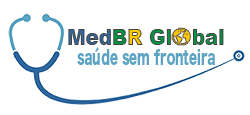
<style>
.page{position:relative;width:250px;height:115px;background:#ffffff}
.page>*{position:absolute;margin:0}
.t1{font:22px "Arial-Black";scale:0.89 1}
.t2{font:18.1px "HiraKakuStd-W8";color:#5da3c3;scale:0.64 1}
</style>
<div class="page">
<p class="t1" style="left:68px;top:29px;width:156px;height:16px">MedBR Gl   bal</p>
<p class="t2" style="left:77px;top:47px;width:138px;height:18px">saúde sem fronteira</p>
</div>
